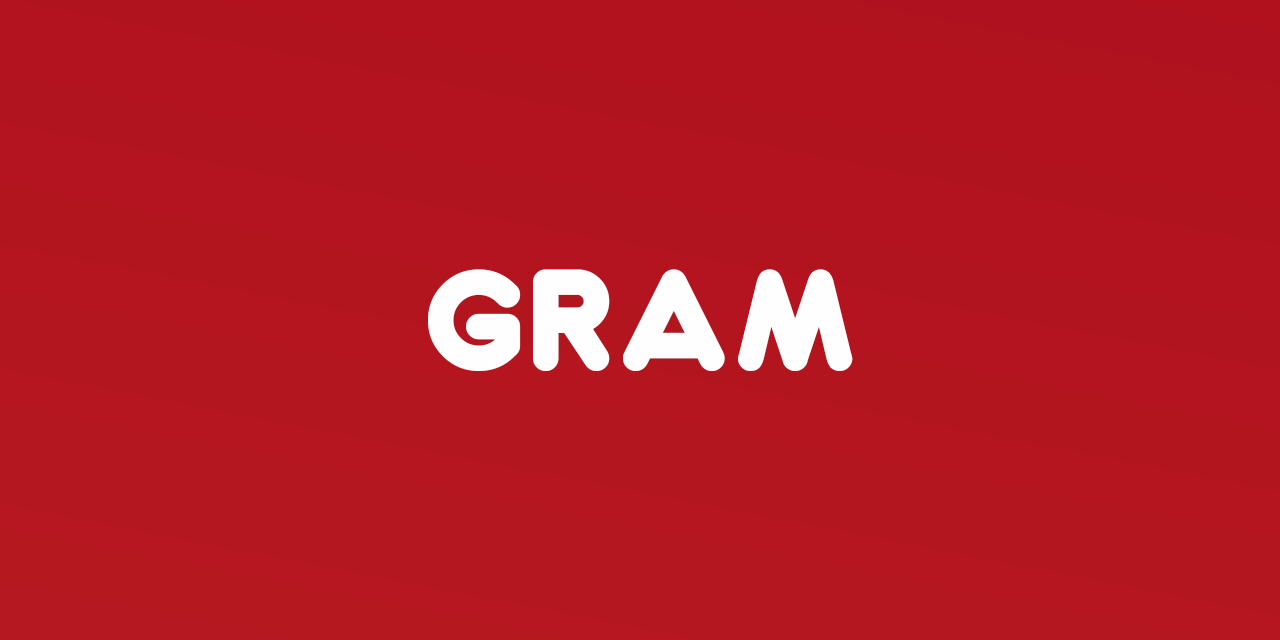
<style>
.page{position:relative;width:1280px;height:640px}
.page>*{position:absolute;margin:0}
.t1{font:130px "DunkinSans";letter-spacing:0.005em;color:#fefefe}
</style>
<div class="page">
<p class="t1" style="left:428px;top:269px;width:425px;height:102px">GRAM</p>
</div>
